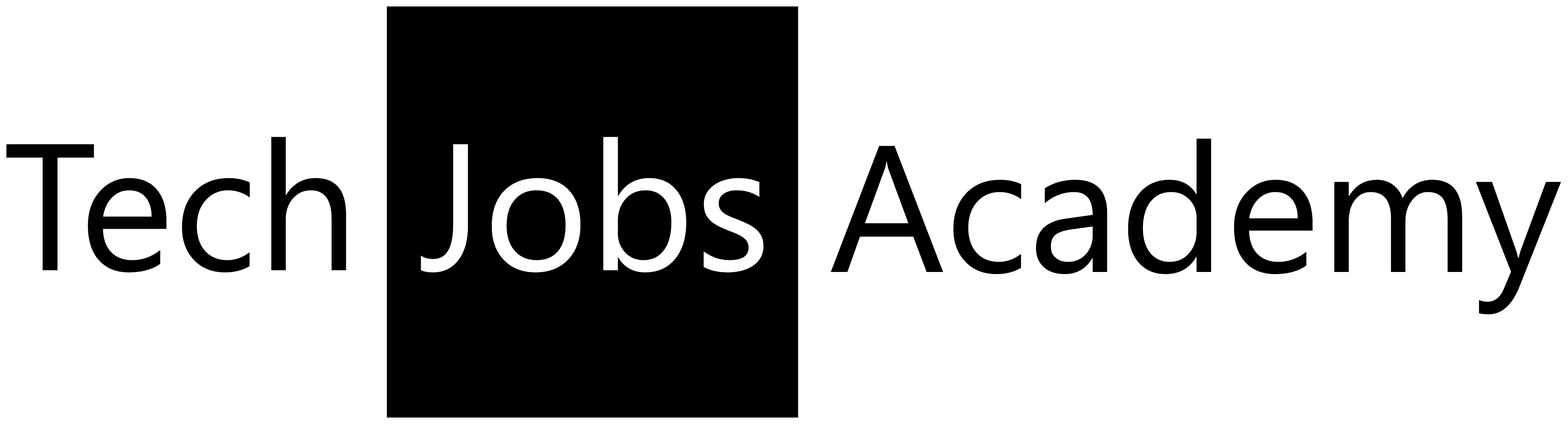
<style>
.page{position:relative;width:1568px;height:424px;background:#ffffff}
.page>*{position:absolute;margin:0}
.t1{font:179.9px "SegoeUI";color:#000000}
</style>
<div class="page">
<p class="t1" style="left:6px;top:137px;width:340px;height:135px">Tech</p>
<p class="t1" style="left:831px;top:138px;width:730px;height:176px">Academy</p>
</div>
